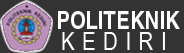
<style>
.page{position:relative;width:184px;height:53px;background:#333333}
.page>*{position:absolute;margin:0}
.t1{font:25px "Helvetica-Bold";color:#ffffff;scale:0.82 1}
.t2{font:25px "ArialNarrow";letter-spacing:0.3em;color:#ffffff}
</style>
<div class="page">
<p class="t1" style="left:58px;top:11px;width:122px;height:18px">POLITEKNIK</p>
<p class="t2" style="left:62px;top:32px;width:103px;height:18px">KEDIRI</p>
</div>
